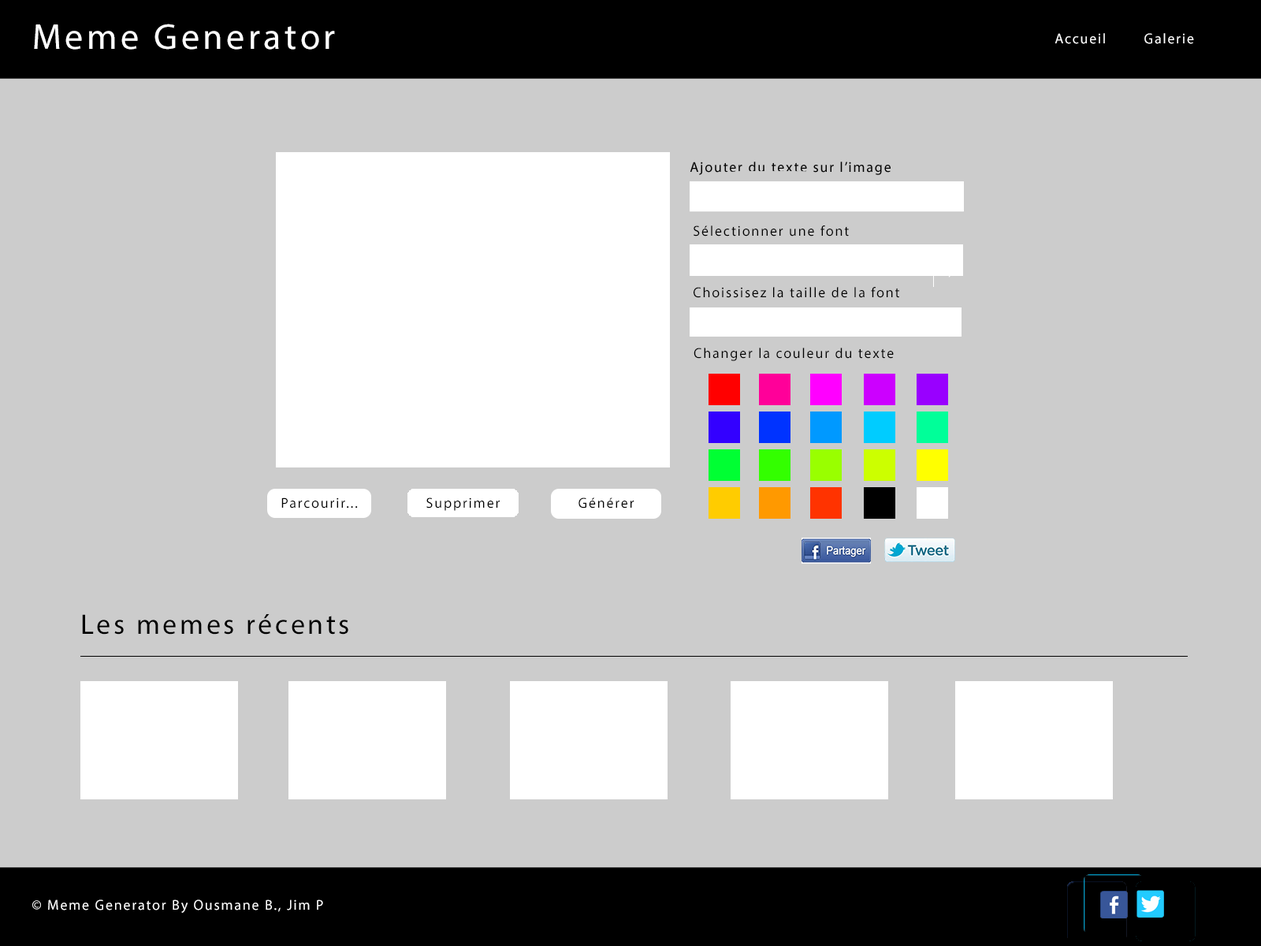
<style>
.page{position:relative;width:1261px;height:946px;background:#cccccc}
.page>*{position:absolute;margin:0}
.t1{font:36.3px "MyriadPro-Regular";letter-spacing:0.1em;color:#ffffff}
.t2{font:14.2px "MyriadPro-Regular";letter-spacing:0.1em;color:#ffffff}
.t3{font:14.2px "MyriadPro-Regular";letter-spacing:0.1em;color:#000000}
.t4{font:28.4px "MyriadPro-Regular";letter-spacing:0.1em;color:#000000}
</style>
<div class="page">
<p class="t1" style="left:34px;top:24px;width:301px;height:26px">Meme Generator</p>
<p class="t2" style="left:1054px;top:33px;width:51px;height:11px">Accueil</p>
<p class="t2" style="left:1144px;top:33px;width:50px;height:11px">Galerie</p>
<p class="t3" style="left:694px;top:225px;width:155px;height:11px">Sélectionner une font</p>
<p class="t3" style="left:694px;top:287px;width:205px;height:11px">Choissisez la taille de la font</p>
<p class="t3" style="left:694px;top:348px;width:200px;height:13px">Changer la couleur du texte</p>
<p class="t3" style="left:281px;top:497px;width:77px;height:11px">Parcourir...</p>
<p class="t3" style="left:426px;top:497px;width:74px;height:14px">Supprimer</p>
<p class="t3" style="left:578px;top:497px;width:56px;height:11px">Générer</p>
<p class="t4" style="left:82px;top:614px;width:266px;height:20px">Les memes récents</p>
<p class="t2" style="left:32px;top:899px;width:291px;height:14px">© Meme Generator By Ousmane B., Jim P</p>
</div>
